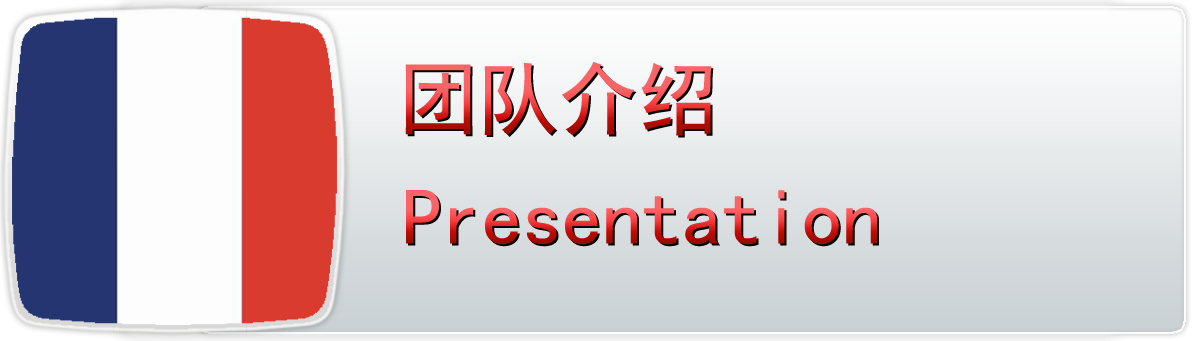
<style>
.page{position:relative;width:1196px;height:341px}
.page>*{position:absolute;margin:0}
.t1{font:80px "SimHei"}
</style>
<div class="page">
<p class="t1" style="left:405px;top:62px;width:307px;height:74px">团队介绍</p>
<p class="t1" style="left:406px;top:190px;width:471px;height:55px">Presentation</p>
</div>
